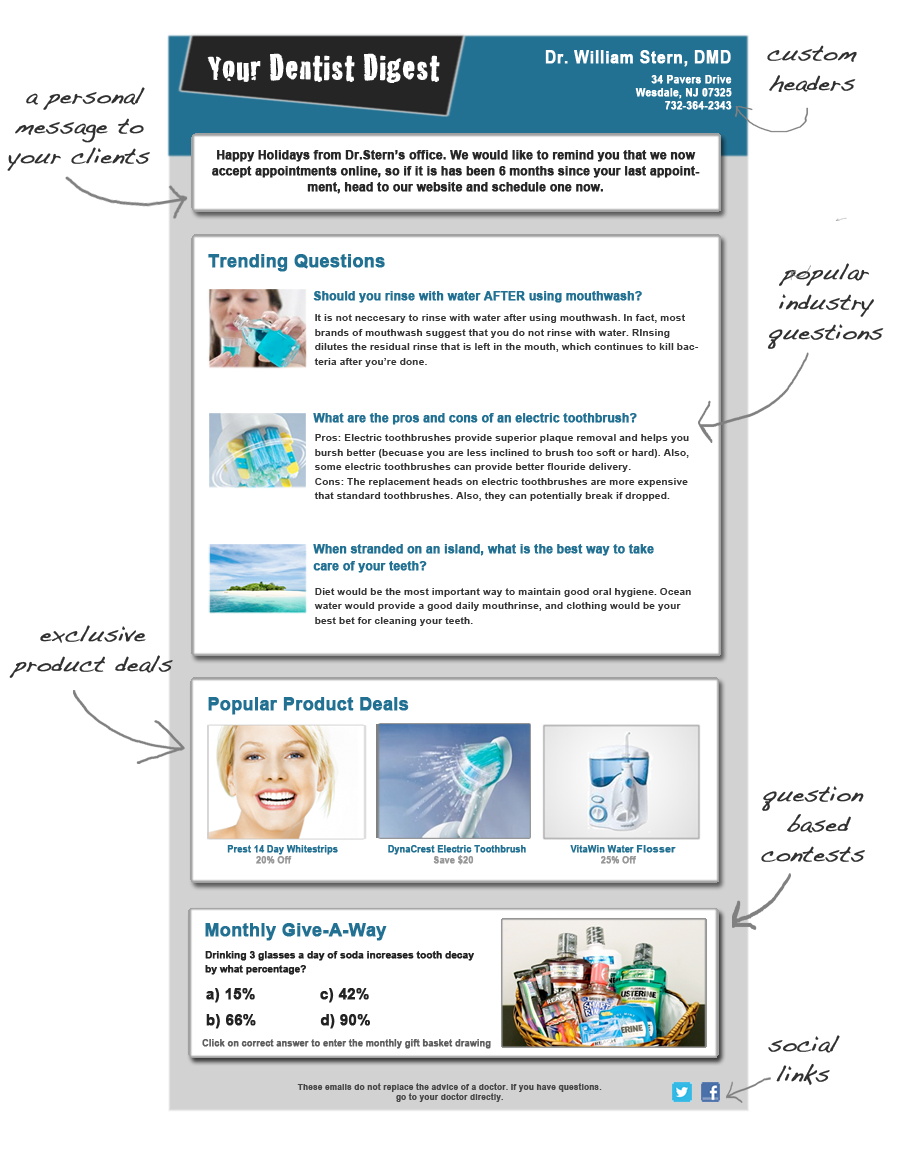
<style>
.page{position:relative;width:902px;height:1152px;background:#ffffff}
.page>*{position:absolute;margin:0}
.t1{font:35.4px "Cracked";letter-spacing:0.01em;color:#ffffff;font-weight:bold}
.t2{font:11px/13.2px "ArialNarrow-Bold";letter-spacing:0.01em;color:#ffffff;font-weight:bold;scale:1.1 1}
.t3{font:17.5px/20.5px "ArialNarrow-Bold";letter-spacing:0.01em;color:#ffffff;font-weight:bold;scale:1.1 1}
.t4{font:17.5px/7.3px "ArialNarrow-Bold";letter-spacing:0.01em;color:#ffffff;font-weight:bold;scale:1.1 1}
.t5{font:22px/30px "Handwriting-Dakota";letter-spacing:0.01em;color:#303030;font-weight:bold}
.t6{font:11.7px/16.1px "Arial-BoldMT";letter-spacing:0.01em;color:#262626;font-weight:bold}
.t7{font:17.5px "Arial-BoldMT";letter-spacing:0.01em;color:#237192;font-weight:bold}
.t8{font:11.7px/20.5px "Arial-BoldMT";letter-spacing:0.01em;color:#237192;font-weight:bold}
.t9{font:11.7px/16.8px "Arial-BoldMT";letter-spacing:0.01em;color:#237192;font-weight:bold}
.t10{font:10.2px/14.6px "Arial-BoldMT";letter-spacing:0.01em;color:#353535}
.t11{font:8.8px "Arial-BoldMT";letter-spacing:0.01em;color:#237192;font-weight:bold}
.t12{font:10.2px "Arial-BoldMT";letter-spacing:0.01em;color:#237192;font-weight:bold}
.t13{font:8.8px "Arial-BoldMT";letter-spacing:0.01em;color:#979797;font-weight:bold}
.t14{font:9.5px/14.6px "Arial-BoldMT";letter-spacing:0.01em;color:#222222;font-weight:bold}
.t15{font:14.6px/26.3px "Arial-BoldMT";letter-spacing:0.01em;color:#222222;font-weight:bold}
.t16{font:8.8px "Arial-BoldMT";letter-spacing:0.01em;color:#5f5f5f;font-weight:bold}
.t17{font:8px/10.2px "Arial-BoldMT";letter-spacing:0.01em;color:#474747;font-weight:bold}
</style>
<div class="page">
<p class="t1" style="left:207px;top:53px;width:233px;height:30px">Your Dentist Digest</p>
<p class="t2" style="left:545px;top:50px;width:187px;height:60px;text-align:right"><span class="t3">Dr. </span><span class="t4">William Stern, DMD<br><br></span>34 Pavers Drive<br>Wesdale, NJ 07325<br>732-364-2343</p>
<p class="t5" style="left:767px;top:45px;width:90px;height:47px;text-align:center">custom <br>headers</p>
<p class="t5" style="left:7px;top:87px;width:143px;height:84px;text-align:center">a personal <br>message to your clients</p>
<p class="t6" style="left:212px;top:150px;width:488px;height:44px;text-align:center">Happy Holidays from Dr.Stern’s office. We would like to remind you that we now accept appointments online, so if it is has been 6 months since your last appointment, head to our website and schedule one now.</p>
<p class="t7" style="left:208px;top:254px;width:177px;height:18px">Trending Questions</p>
<p class="t5" style="left:767px;top:263px;width:117px;height:86px;text-align:center">popular <br>industry <br>questions</p>
<p class="t8" style="left:313px;top:291px;width:341px;height:282px">Should you rinse with water AFTER using mouthwash?<br><br><br><br><br><br>What are the pros and cons of an electric toothbrush?<br><br><br><br><br><br><br><span class="t9">When stranded on an island, what is the best way to take <br>care of your teeth?</span></p>
<p class="t10" style="left:314px;top:314px;width:385px;height:312px">It is not neccesary to rinse with water after using mouthwash. In fact, most brands of mouthwash suggest that you do not rinse with water. RInsing dilutes the residual rinse that is left in the mouth, which continues to kill bacteria after you’re done.<br><br><br><br><br><br>Pros: Electric toothbrushes provide superior plaque removal and helps you bursh better (becuase you are less inclined to brush too soft or hard). Also, some electric toothbrushes can provide better flouride delivery.<br>Cons: The replacement heads on electric toothbrushes are more expensive that standard toothbrushes. Also, they can potentially break if dropped.<br><br><br><br><br><br><br><br><br><br>Diet would be the most important way to maintain good oral hygiene. Ocean water would provide a good daily mouthrinse, and clothing would be your best bet for cleaning your teeth.</p>
<p class="t5" style="left:9px;top:625px;width:164px;height:53px;text-align:center">exclusive product deals</p>
<p class="t7" style="left:208px;top:697px;width:201px;height:18px">Popular Product Deals</p>
<p class="t5" style="left:761px;top:786px;width:104px;height:76px;text-align:center">question<br> based <br>contests</p>
<p class="t11" style="left:227px;top:845px;width:449px;height:10px">Prest 14 Day Whitestrips                  DynaCrest Electric Toothbrush                VitaWin Water <span class="t12">Flosser</span></p>
<p class="t13" style="left:256px;top:855px;width:381px;height:10px">20% Off             Save $20       25% Off</p>
<p class="t7" style="left:205px;top:923px;width:182px;height:18px">Monthly Give-A-Way</p>
<p class="t14" style="left:205px;top:951px;width:269px;height:24px">Drinking 3 glasses a day of soda increases tooth decay by what percentage?</p>
<p class="t15" style="left:206px;top:988px;width:164px;height:41px">a) 15%              c) 42%<br>b) 66%     d) 90%</p>
<p class="t5" style="left:768px;top:1035px;width:72px;height:50px;text-align:center">social <br>links</p>
<p class="t16" style="left:202px;top:1039px;width:289px;height:10px">Click on correct answer to enter the monthly gift basket drawing</p>
<p class="t17" style="left:297px;top:1083px;width:305px;height:19px;text-align:center">These emails do not replace the advice of a doctor. If you have questions.<br>go to your doctor directly.</p>
</div>
